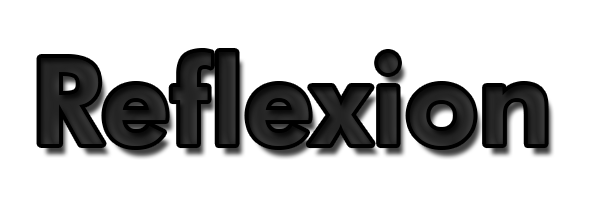
<style>
.page{position:relative;width:600px;height:200px;background:#ffffff}
.page>*{position:absolute;margin:0}
.t1{font:120px "FuturaBT-Heavy";color:#252525}
</style>
<div class="page">
<p class="t1" style="left:40px;top:52px;width:505px;height:94px">Reflexion</p>
</div>
